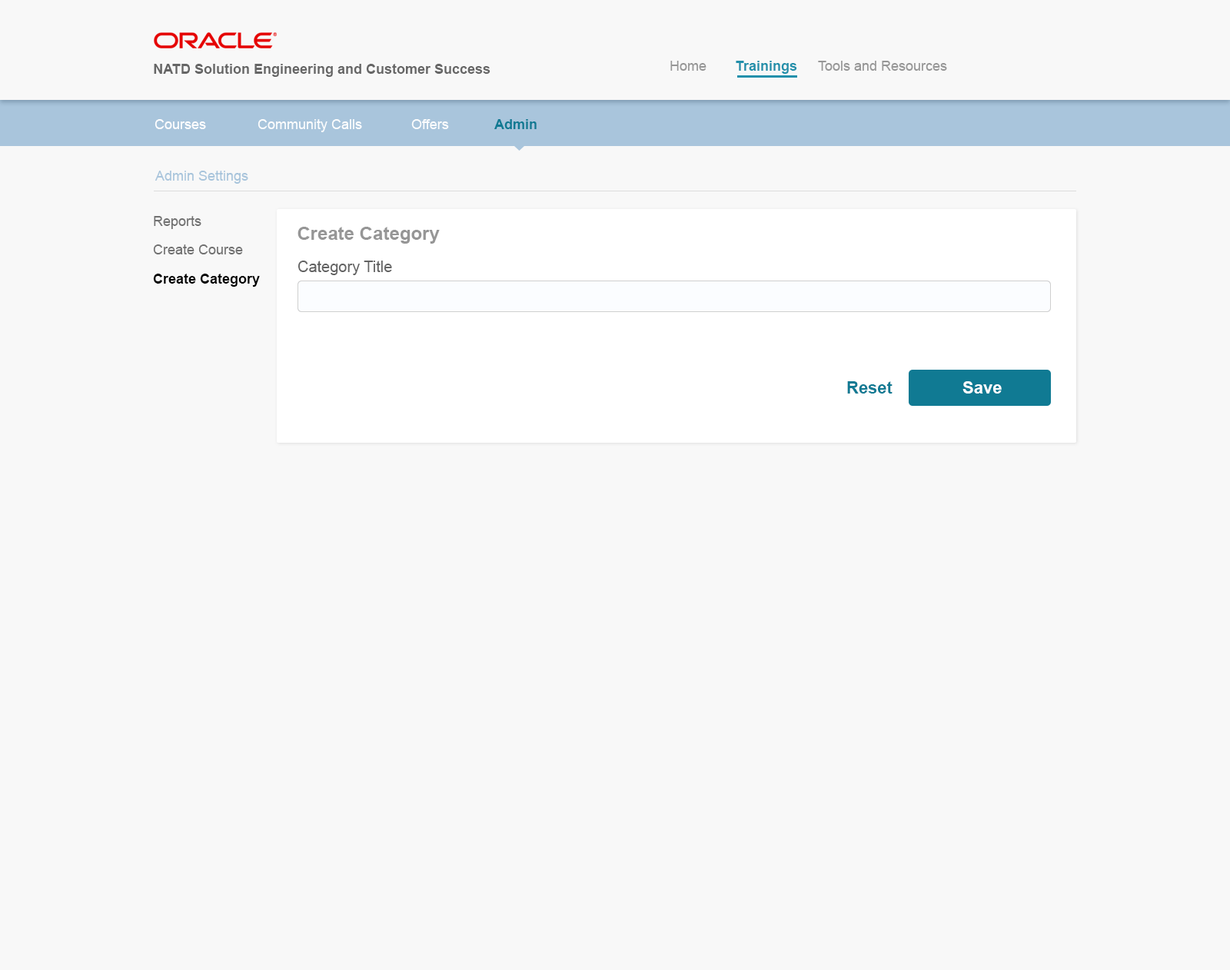
<style>
.page{position:relative;width:1230px;height:970px;background:#f8f8f8}
.page>*{position:absolute;margin:0}
.t1{font:13.8px "Arial-BoldMT";color:#666666}
.t2{font:13.8px "ArialMT";color:#969696}
.t3{font:13.8px "Arial-BoldMT";color:#2290ab}
.t4{font:13.8px "ArialMT";color:#ffffff}
.t5{font:13.8px "Arial-BoldMT";color:#00758f}
.t6{font:13.8px "ArialMT";color:#a9c5dc}
.t7{font:13.8px "ArialMT";color:#717171}
.t8{font:18.4px "Arial-BoldMT";color:#969696}
.t9{font:15.4px "ArialMT";color:#636363}
.t10{font:13.8px "Arial-BoldMT";color:#000000}
.t11{font:16.9px "Arial-BoldMT";color:#107a93}
.t12{font:16.9px "Arial-BoldMT";color:#ffffff}
</style>
<div class="page">
<p class="t1" style="left:154px;top:64px;width:336px;height:13px">NATD Solution Engineering and Customer Success</p>
<p class="t2" style="left:670px;top:61px;width:36px;height:10px">Home</p>
<p class="t3" style="left:735px;top:61px;width:62px;height:13px">Trainings</p>
<p class="t2" style="left:818px;top:61px;width:129px;height:10px">Tools and Resources</p>
<p class="t4" style="left:154px;top:119px;width:52px;height:10px">Courses</p>
<p class="t4" style="left:257px;top:119px;width:105px;height:13px;opacity:0.95">Community Calls</p>
<p class="t4" style="left:411px;top:119px;width:38px;height:10px;opacity:0.95">Offers</p>
<p class="t5" style="left:494px;top:119px;width:42px;height:10px;opacity:0.95">Admin</p>
<p class="t6" style="left:154px;top:171px;width:94px;height:13px">Admin Settings</p>
<p class="t7" style="left:154px;top:216px;width:47px;height:13px">Reports</p>
<p class="t8" style="left:297px;top:227px;width:143px;height:17px">Create Category</p>
<p class="t7" style="left:153px;top:244px;width:90px;height:10px">Create Course</p>
<p class="t9" style="left:297px;top:261px;width:95px;height:14px">Category Title</p>
<p class="t10" style="left:153px;top:274px;width:107px;height:13px">Create Category</p>
<p class="t11" style="left:847px;top:381px;width:45px;height:12px">Reset</p>
<p class="t12" style="left:962px;top:381px;width:39px;height:12px">Save</p>
</div>
